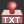
<style>
.page{position:relative;width:24px;height:24px;background:#333333}
.page>*{position:absolute;margin:0}
.t1{font:8px "Verdana";color:#ffffff}
</style>
<div class="page">
<p class="t1" style="left:3px;top:17px;width:5px;height:6px">T</p>
<p class="t1" style="left:9px;top:17px;width:6px;height:6px">X</p>
<p class="t1" style="left:15px;top:17px;width:5px;height:6px">T</p>
</div>
